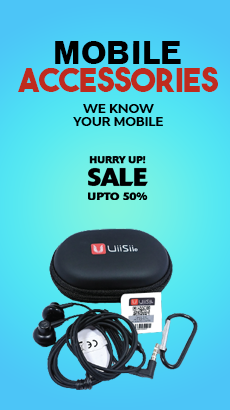
<style>
.page{position:relative;width:230px;height:410px}
.page>*{position:absolute;margin:0}
.t1{font:33.3px "AGOldFace-Bold";letter-spacing:-0.02em;color:#000000}
.t2{font:33.3px/28.9px "TheBoldFont";letter-spacing:-0.02em;color:#bf2b1e}
.t3{font:12.5px/20.8px "Adlinnaka-BoldDemo";letter-spacing:-0.02em;color:#000000}
.t4{font:12.5px/12.5px "Adlinnaka-BoldDemo";letter-spacing:-0.02em;color:#000000}
</style>
<div class="page">
<p class="t1" style="left:55px;top:41px;width:126px;height:23px">MOBILE</p>
<p class="t2" style="left:18px;top:67px;width:200px;height:59px;text-align:center">ACCESSORIES<br><span class="t3">WE KNOW<br></span><span class="t4">YOUR MOBILE</span></p>
</div>
